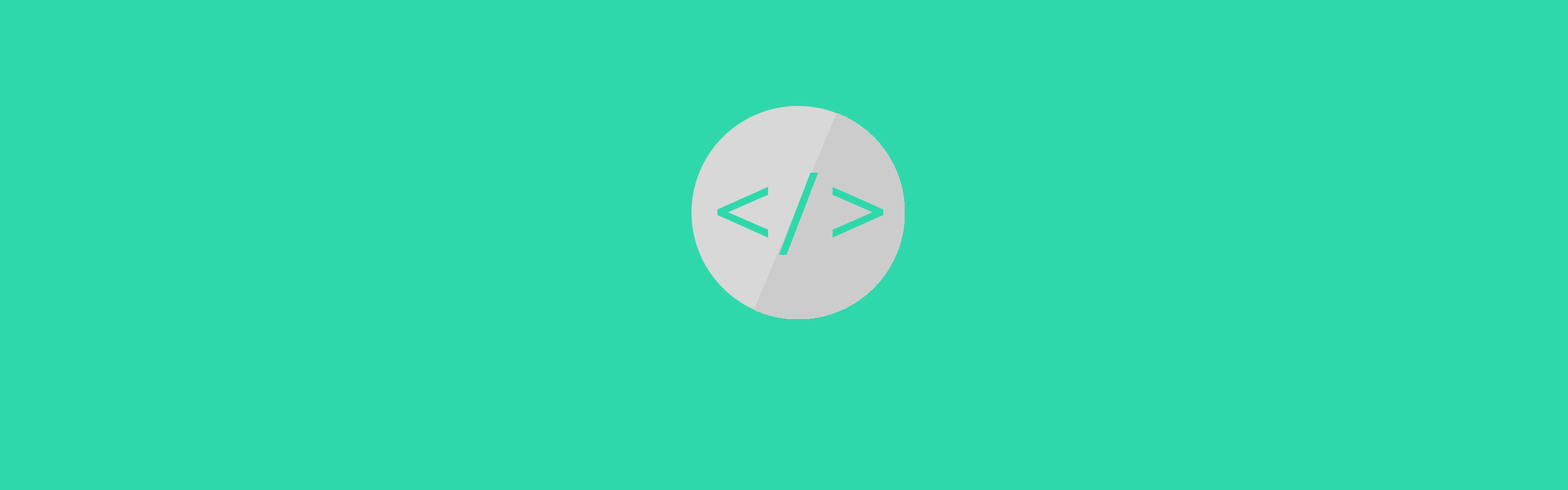
<style>
.page{position:relative;width:1568px;height:490px;background:#2fd8aa}
.page>*{position:absolute;margin:0}
.t1{font:90px "Verdana";color:#2fd8aa}
</style>
<div class="page">
<p class="t1" style="left:717px;top:173px;width:167px;height:82px">&lt;/&gt;</p>
</div>
